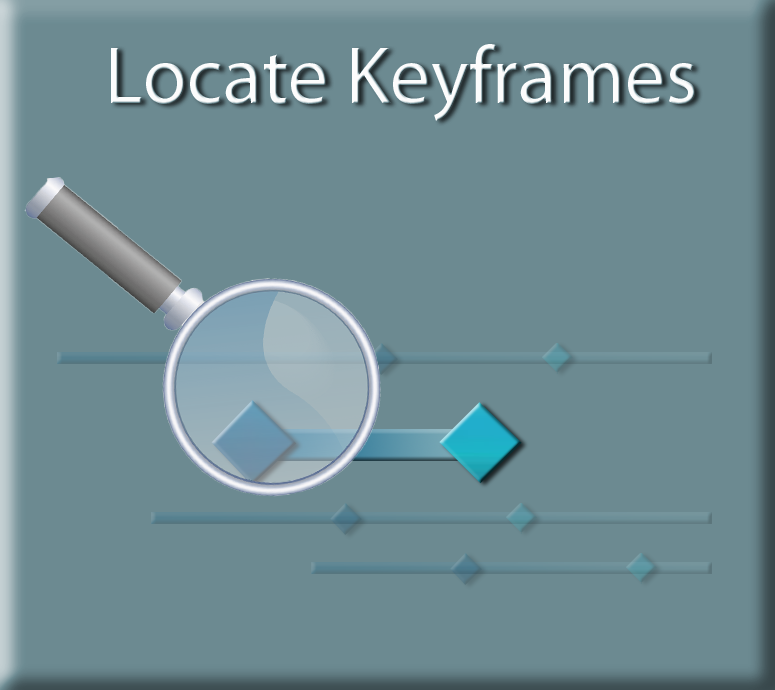
<style>
.page{position:relative;width:775px;height:690px;background:#6c8a91}
.page>*{position:absolute;margin:0}
.t1{font:81px "MyriadPro-Regular";color:#fdfbfb}
</style>
<div class="page">
<p class="t1" style="left:111px;top:44px;width:584px;height:77px">Locate Keyframes</p>
</div>
